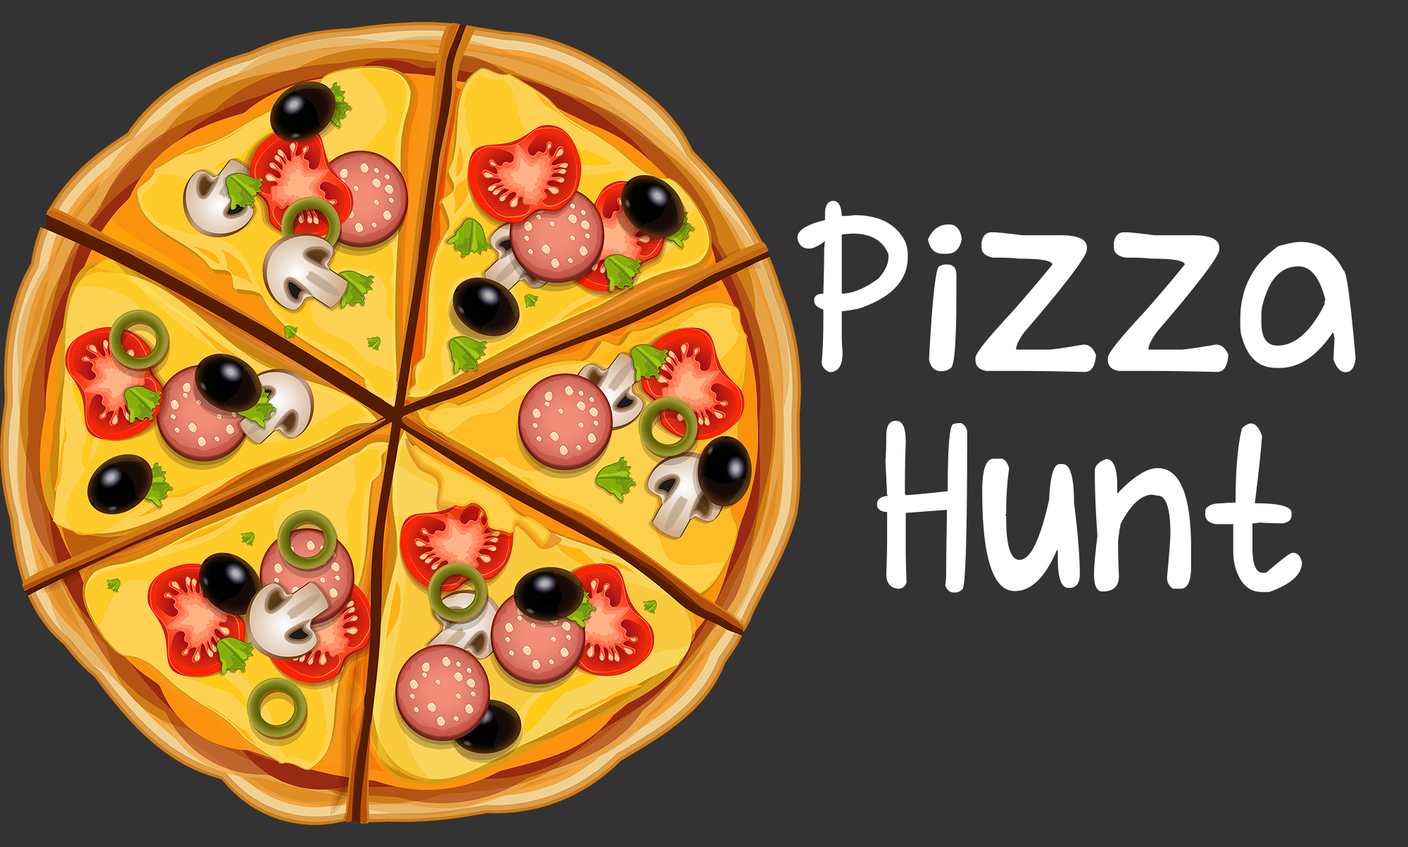
<style>
.page{position:relative;width:1408px;height:847px;background:#333333}
.page>*{position:absolute;margin:0}
.t1{font:211.2px "asinastra";color:#ffffff}
</style>
<div class="page">
<p class="t1" style="left:797px;top:201px;width:559px;height:171px">Pizza</p>
<p class="t1" style="left:876px;top:420px;width:426px;height:173px">Hunt</p>
</div>
